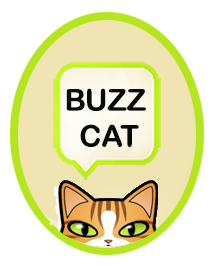
<style>
.page{position:relative;width:216px;height:266px;background:#ffffff}
.page>*{position:absolute;margin:0}
.t1{font:30px "ArialRoundedMTBold";color:#080807}
</style>
<div class="page">
<p class="t1" style="left:66px;top:88px;width:80px;height:59px;text-align:center">BUZZ <br>CAT</p>
</div>
